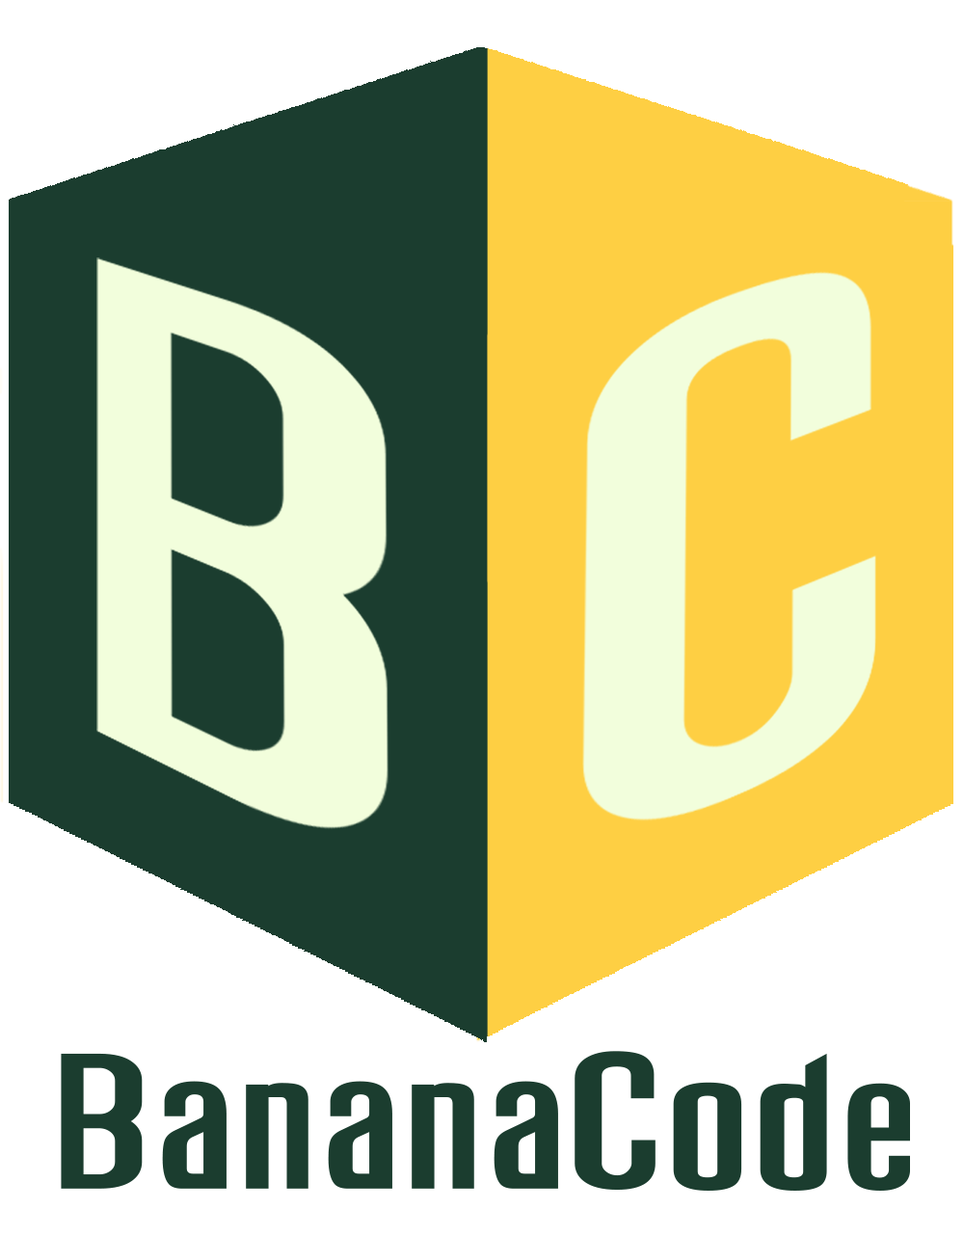
<style>
.page{position:relative;width:964px;height:1236px;background:#ffffff}
.page>*{position:absolute;margin:0}
.t1{font:232.1px "ChiquitaNormal";letter-spacing:0.01em;color:#1b3d2f}
</style>
<div class="page">
<p class="t1" style="left:61px;top:1051px;width:849px;height:140px">BananaCode</p>
</div>
